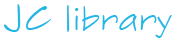
<style>
.page{position:relative;width:180px;height:40px;background:#ffffff}
.page>*{position:absolute;margin:0}
.t1{font:31px "SketchFlowPrint";color:#20b8e5}
.t2{font:38px "SketchFlowPrint";color:#20b8e5}
</style>
<div class="page">
<p class="t1" style="left:3px;top:4px;width:169px;height:34px"><span class="t2">JC</span> library</p>
</div>
